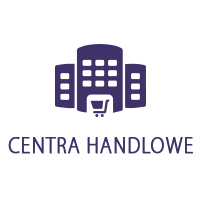
<style>
.page{position:relative;width:200px;height:200px;background:#ffffff}
.page>*{position:absolute;margin:0}
.t1{font:23.9px "MyriadPro-Light";letter-spacing:0.025em;color:#403168;text-transform:uppercase;font-weight:bold;scale:0.83 1}
</style>
<div class="page">
<p class="t1" style="left:8px;top:137px;width:185px;height:17px">Centra handlowe</p>
</div>
